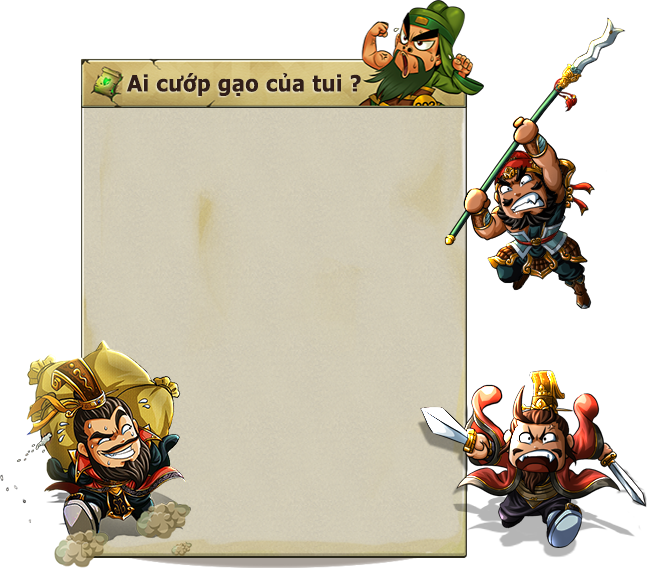
<style>
.page{position:relative;width:652px;height:569px;background:#ffffff}
.page>*{position:absolute;margin:0}
.t1{font:22.3px "Verdana-Bold";color:#311e18;scale:0.9 1}
</style>
<div class="page">
<p class="t1" style="left:126px;top:73px;width:235px;height:23px">Ai cướp gạo của tui ?</p>
</div>
